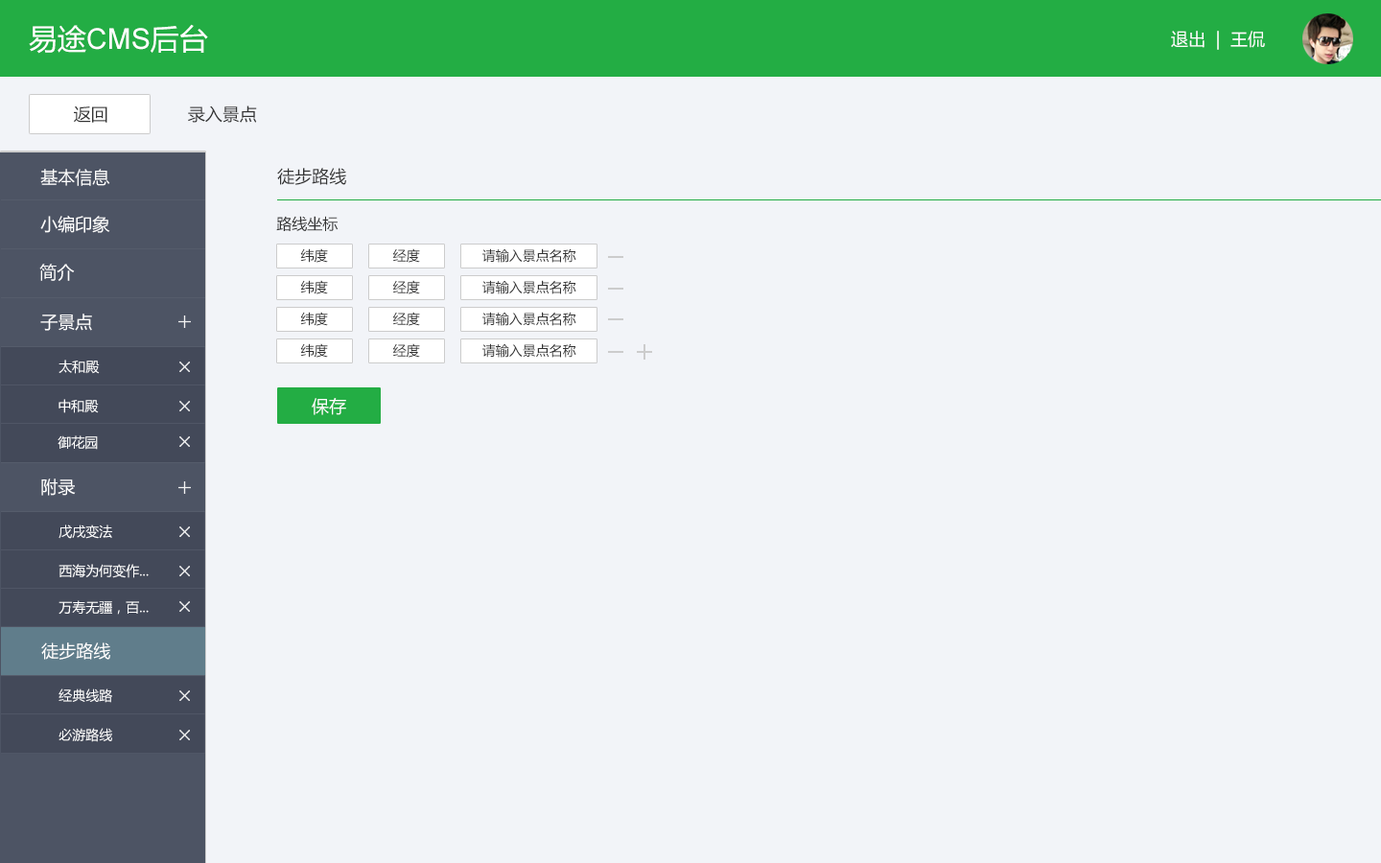
<style>
.page{position:relative;width:1381px;height:863px;background:#f2f4f8}
.page>*{position:absolute;margin:0}
.t1{font:28.8px "ArialMT";color:#ffffff}
.t2{font:28.8px "MicrosoftYaHei";color:#ffffff}
.t3{font:17.3px "MicrosoftYaHei";color:#ffffff}
.t4{font:17.3px "MicrosoftYaHei";color:#333333}
.t5{font:15.3px "MicrosoftYaHei";color:#333333}
.t6{font:13.4px "MicrosoftYaHei";color:#333333}
.t7{font:13.4px "MicrosoftYaHei";color:#ffffff}
</style>
<div class="page">
<p class="t1" style="left:29px;top:24px;width:179px;height:30px"><span class="t2">易途</span>CMS<span class="t2">后台</span></p>
<p class="t3" style="left:1171px;top:31px;width:94px;height:19px">退出  |  王侃</p>
<p class="t4" style="left:74px;top:106px;width:33px;height:17px">返回</p>
<p class="t4" style="left:188px;top:106px;width:69px;height:17px">录入景点</p>
<p class="t3" style="left:40px;top:169px;width:70px;height:17px">基本信息</p>
<p class="t4" style="left:277px;top:168px;width:69px;height:17px">徒步路线</p>
<p class="t3" style="left:40px;top:216px;width:70px;height:17px">小编印象</p>
<p class="t5" style="left:276px;top:216px;width:62px;height:15px">路线坐标</p>
<p class="t6" style="left:300px;top:248px;width:28px;height:15px">纬度</p>
<p class="t6" style="left:393px;top:248px;width:27px;height:15px">经度</p>
<p class="t6" style="left:482px;top:248px;width:94px;height:15px">请输入景点名称</p>
<p class="t3" style="left:39px;top:264px;width:36px;height:17px">简介</p>
<p class="t6" style="left:300px;top:280px;width:28px;height:14px">纬度</p>
<p class="t6" style="left:393px;top:280px;width:27px;height:14px">经度</p>
<p class="t6" style="left:482px;top:280px;width:94px;height:14px">请输入景点名称</p>
<p class="t3" style="left:40px;top:314px;width:52px;height:17px">子景点</p>
<p class="t6" style="left:300px;top:312px;width:28px;height:14px">纬度</p>
<p class="t6" style="left:393px;top:312px;width:27px;height:14px">经度</p>
<p class="t6" style="left:482px;top:312px;width:94px;height:14px">请输入景点名称</p>
<p class="t6" style="left:300px;top:343px;width:28px;height:15px">纬度</p>
<p class="t6" style="left:393px;top:343px;width:27px;height:15px">经度</p>
<p class="t6" style="left:482px;top:343px;width:94px;height:15px">请输入景点名称</p>
<p class="t7" style="left:59px;top:360px;width:41px;height:14px">太和殿</p>
<p class="t7" style="left:59px;top:399px;width:40px;height:14px">中和殿</p>
<p class="t3" style="left:312px;top:398px;width:34px;height:17px">保存</p>
<p class="t7" style="left:58px;top:435px;width:40px;height:15px">御花园</p>
<p class="t3" style="left:41px;top:479px;width:35px;height:17px">附录</p>
<p class="t7" style="left:59px;top:525px;width:53px;height:14px">戊戌变法</p>
<p class="t7" style="left:59px;top:564px;width:90px;height:14px">西海为何变作...</p>
<p class="t7" style="left:59px;top:600px;width:90px;height:15px">万寿无疆，百...</p>
<p class="t3" style="left:41px;top:643px;width:69px;height:17px">徒步路线</p>
<p class="t7" style="left:59px;top:689px;width:53px;height:14px">经典线路</p>
<p class="t7" style="left:59px;top:728px;width:53px;height:14px">必游路线</p>
</div>
